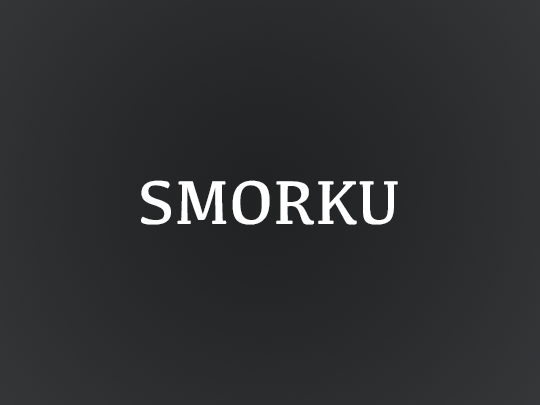
<style>
.page{position:relative;width:540px;height:405px}
.page>*{position:absolute;margin:0}
.t1{font:64px "Kefa-Regular";color:#ffffff}
</style>
<div class="page">
<p class="t1" style="left:141px;top:180px;width:257px;height:45px">SMORKU</p>
</div>
